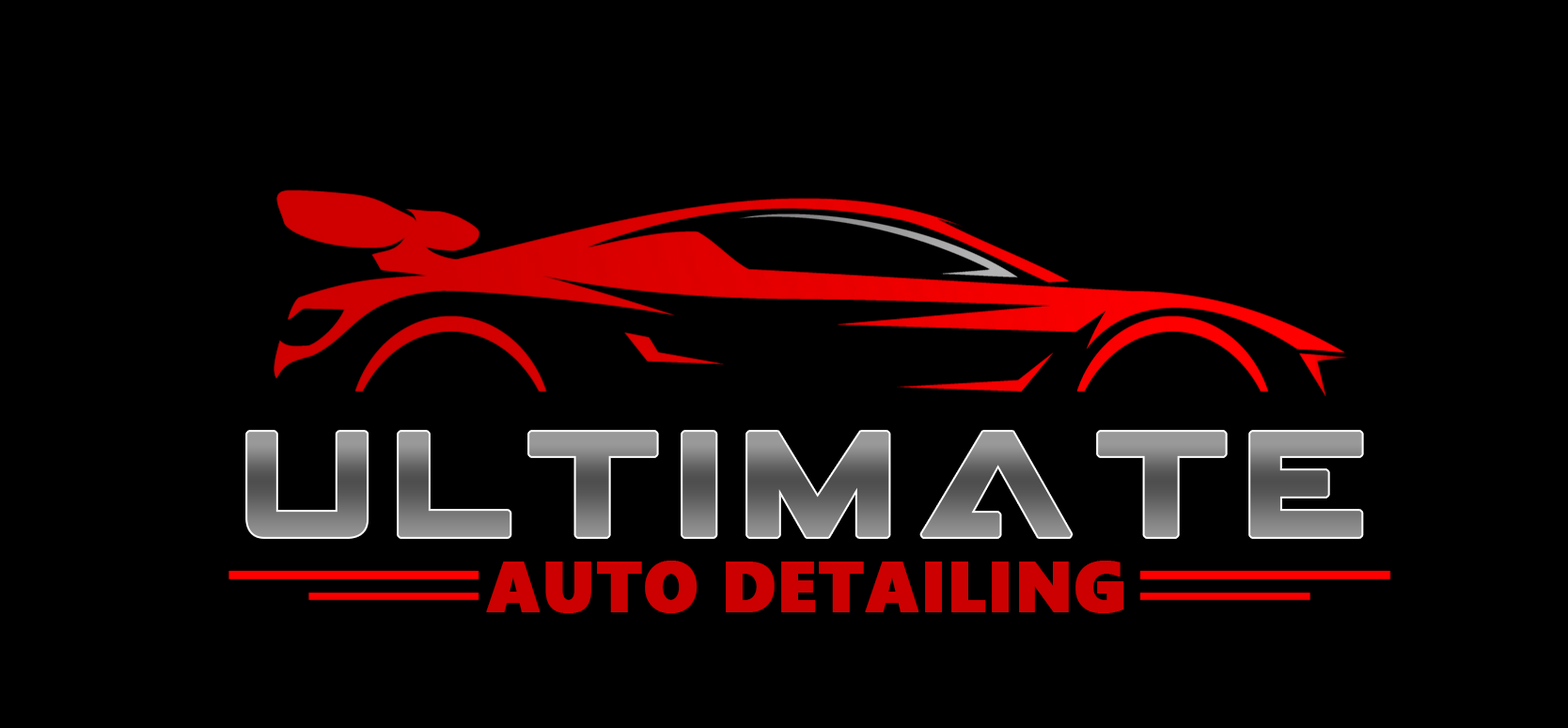
<style>
.page{position:relative;width:1568px;height:728px;background:#000000}
.page>*{position:absolute;margin:0}
.t1{font:126.9px "GAMECUBENDualSet";letter-spacing:0.025em;text-transform:uppercase;font-weight:bold}
.t2{font:70.5px "SegoeUIBlack";letter-spacing:0.005em;color:#cc0000;text-transform:uppercase;font-weight:bold}
</style>
<div class="page">
<p class="t1" style="left:247px;top:431px;width:1115px;height:106px">Ultimate</p>
<p class="t2" style="left:486px;top:560px;width:638px;height:53px">Auto DeTailing</p>
</div>
